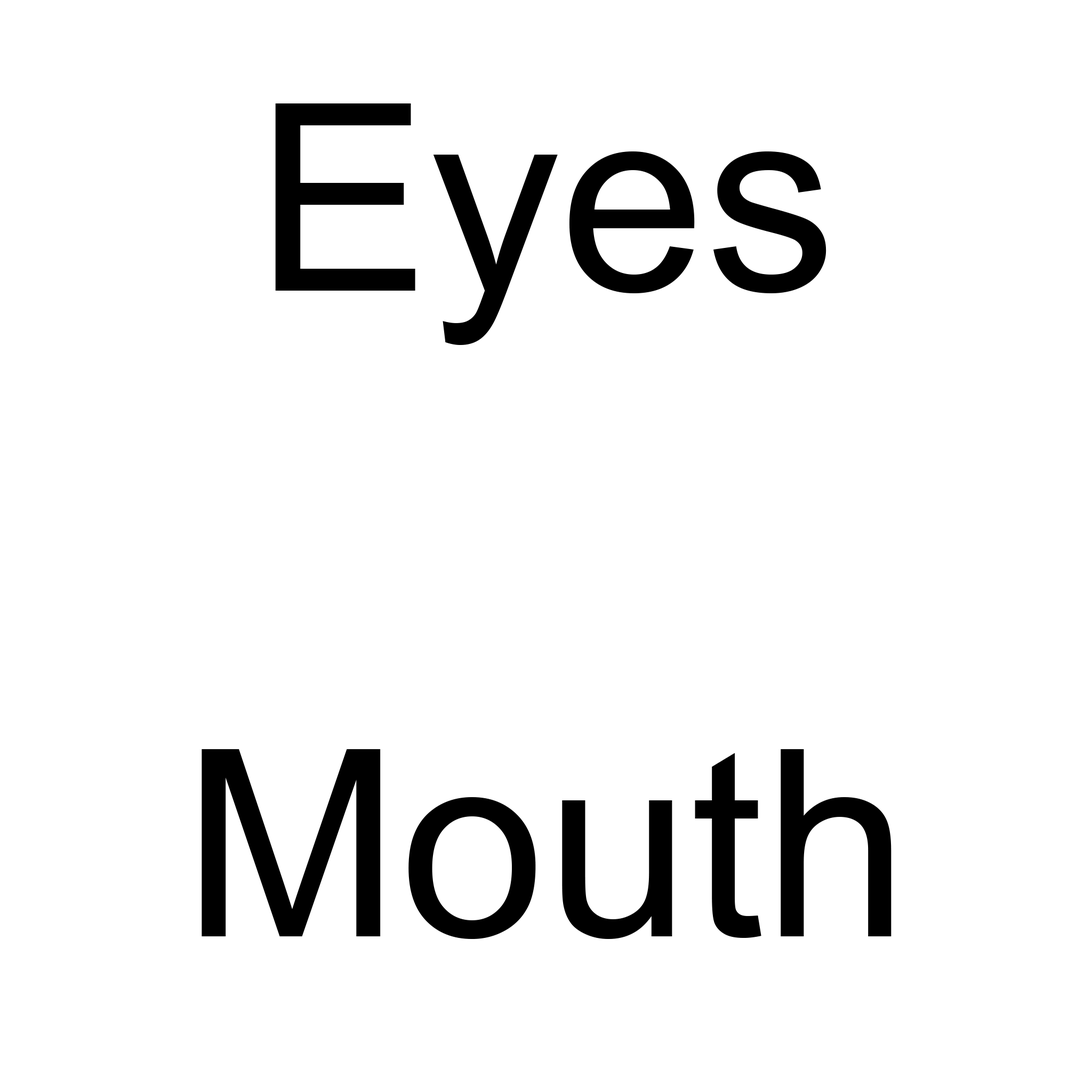
<style>
.page{position:relative;width:1092px;height:1092px;background:#ffffff}
.page>*{position:absolute;margin:0}
.t1{font:261.4px "ArialMT";color:#000000}
</style>
<div class="page">
<p class="t1" style="left:275px;top:103px;width:551px;height:242px">Eyes</p>
<p class="t1" style="left:202px;top:749px;width:690px;height:190px">Mouth</p>
</div>
